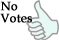
<style>
.page{position:relative;width:59px;height:40px;background:#ffffff}
.page>*{position:absolute;margin:0}
.t1{font:12px/12px "BookAntiqua";letter-spacing:0.005em;color:#000000;font-weight:bold}
</style>
<div class="page">
<p class="t1" style="left:0px;top:1px;width:32px;height:22px">No<br>Votes</p>
</div>
